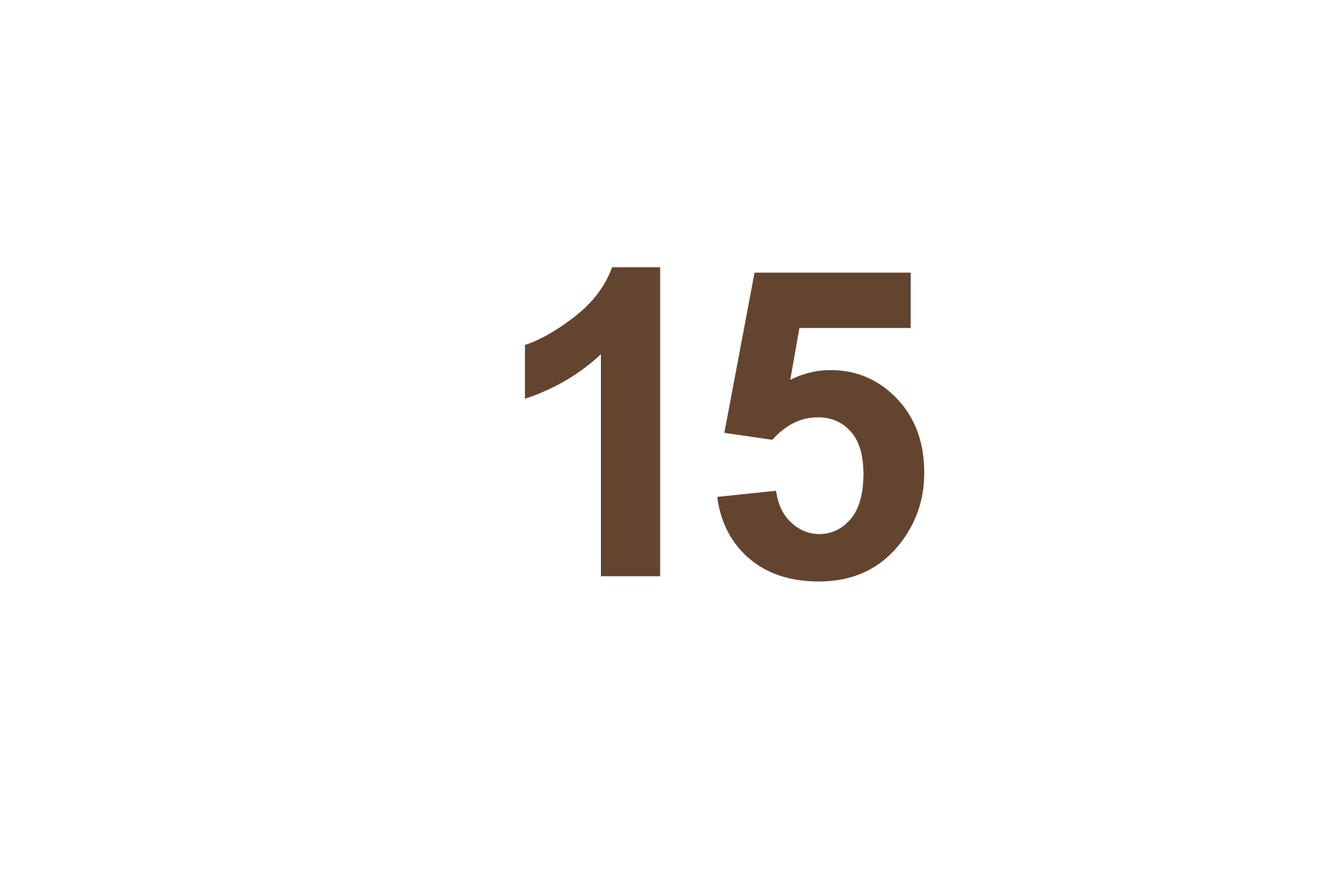
<style>
.page{position:relative;width:1337px;height:892px;background:#ffffff}
.page>*{position:absolute;margin:0}
.t1{font:429.6px "Arial-BoldMT";color:#63442f}
</style>
<div class="page">
<p class="t1" style="left:525px;top:267px;width:400px;height:315px">15</p>
</div>
